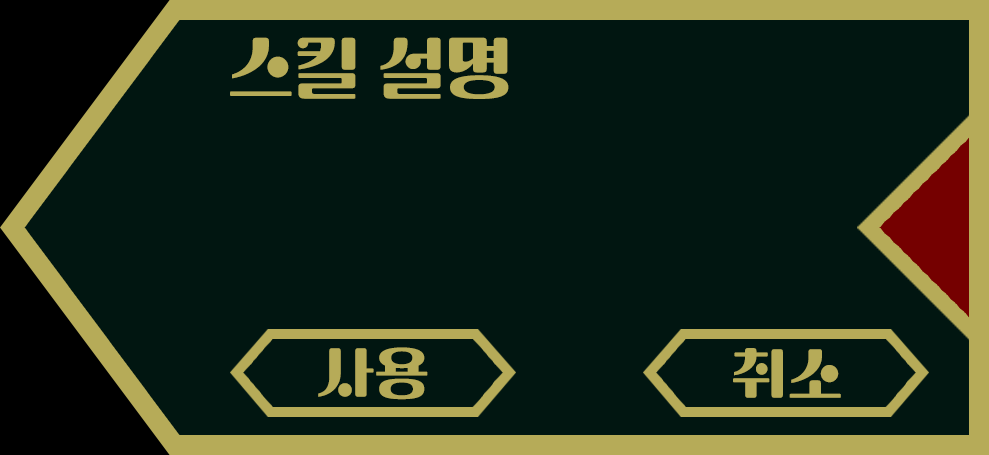
<style>
.page{position:relative;width:989px;height:455px;background:#011611}
.page>*{position:absolute;margin:0}
.t1{font:66.7px "TTSantoriniR";color:#b6ab58}
.t2{font:55.6px "TTSantoriniR";color:#b6ab58}
</style>
<div class="page">
<p class="t1" style="left:230px;top:37px;width:279px;height:62px">스킬 설명</p>
<p class="t2" style="left:318px;top:347px;width:110px;height:53px">사용</p>
<p class="t2" style="left:733px;top:348px;width:108px;height:50px">취소</p>
</div>
